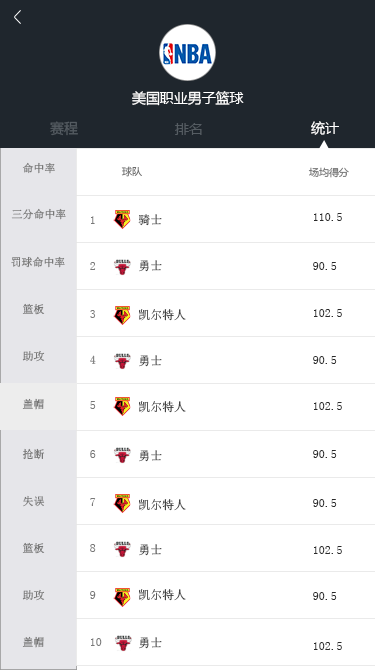
<style>
.page{position:relative;width:375px;height:670px;background:#ffffff}
.page>*{position:absolute;margin:0}
.t1{font:14px "MicrosoftYaHei";letter-spacing:-0.005em;color:#ffffff}
.t2{font:14px "MicrosoftYaHei";letter-spacing:-0.005em;color:#555c62}
.t3{font:11px "SimSun";letter-spacing:-0.005em;color:#787878}
.t4{font:10px "MicrosoftYaHei";letter-spacing:-0.005em;color:#6c6c6c}
.t5{font:12px "SimSun";letter-spacing:-0.005em;color:#787878}
.t6{font:12px "SimSun";letter-spacing:-0.005em}
.t7{font:12px "SimSun";letter-spacing:-0.005em;color:#2a2a2a}
</style>
<div class="page">
<p class="t1" style="left:132px;top:91px;width:112px;height:15px">美国职业男子篮球</p>
<p class="t2" style="left:50px;top:121px;width:28px;height:15px">赛程</p>
<p class="t2" style="left:175px;top:123px;width:27px;height:12px">排名</p>
<p class="t1" style="left:311px;top:121px;width:28px;height:14px">统计</p>
<p class="t3" style="left:22px;top:162px;width:33px;height:12px">命中率</p>
<p class="t4" style="left:121px;top:166px;width:21px;height:11px">球队</p>
<p class="t4" style="left:308px;top:167px;width:41px;height:11px">场均得分</p>
<p class="t3" style="left:11px;top:208px;width:55px;height:12px">三分命中率</p>
<p class="t5" style="left:91px;top:216px;width:4px;height:8px">1</p>
<p class="t6" style="left:138px;top:214px;width:24px;height:12px">骑士</p>
<p class="t7" style="left:314px;top:213px;width:28px;height:8px">110.5</p>
<p class="t3" style="left:11px;top:256px;width:54px;height:12px">罚球命中率</p>
<p class="t5" style="left:90px;top:262px;width:6px;height:8px">2</p>
<p class="t6" style="left:139px;top:260px;width:23px;height:12px">勇士</p>
<p class="t7" style="left:313px;top:262px;width:24px;height:8px">90.5</p>
<p class="t3" style="left:22px;top:303px;width:23px;height:12px">篮板</p>
<p class="t5" style="left:90px;top:310px;width:6px;height:8px">3</p>
<p class="t6" style="left:139px;top:309px;width:47px;height:12px">凯尔特人</p>
<p class="t7" style="left:314px;top:309px;width:28px;height:8px">102.5</p>
<p class="t3" style="left:22px;top:350px;width:23px;height:12px">助攻</p>
<p class="t5" style="left:90px;top:355px;width:6px;height:9px">4</p>
<p class="t6" style="left:139px;top:355px;width:23px;height:12px">勇士</p>
<p class="t7" style="left:313px;top:356px;width:24px;height:8px">90.5</p>
<p class="t3" style="left:22px;top:398px;width:22px;height:12px">盖帽</p>
<p class="t5" style="left:90px;top:401px;width:6px;height:8px">5</p>
<p class="t6" style="left:139px;top:401px;width:47px;height:12px">凯尔特人</p>
<p class="t7" style="left:314px;top:402px;width:28px;height:8px">102.5</p>
<p class="t3" style="left:22px;top:448px;width:23px;height:12px">抢断</p>
<p class="t5" style="left:90px;top:450px;width:6px;height:8px">6</p>
<p class="t6" style="left:139px;top:450px;width:23px;height:12px">勇士</p>
<p class="t7" style="left:313px;top:450px;width:24px;height:8px">90.5</p>
<p class="t3" style="left:23px;top:495px;width:22px;height:12px">失误</p>
<p class="t5" style="left:90px;top:498px;width:6px;height:8px">7</p>
<p class="t6" style="left:139px;top:499px;width:47px;height:12px">凯尔特人</p>
<p class="t7" style="left:313px;top:499px;width:24px;height:8px">90.5</p>
<p class="t3" style="left:22px;top:542px;width:23px;height:12px">篮板</p>
<p class="t5" style="left:90px;top:544px;width:6px;height:8px">8</p>
<p class="t6" style="left:139px;top:544px;width:23px;height:12px">勇士</p>
<p class="t7" style="left:314px;top:546px;width:28px;height:8px">102.5</p>
<p class="t3" style="left:22px;top:589px;width:23px;height:12px">助攻</p>
<p class="t5" style="left:90px;top:591px;width:6px;height:8px">9</p>
<p class="t6" style="left:139px;top:589px;width:47px;height:12px">凯尔特人</p>
<p class="t7" style="left:313px;top:592px;width:24px;height:8px">90.5</p>
<p class="t3" style="left:22px;top:636px;width:22px;height:12px">盖帽</p>
<p class="t5" style="left:91px;top:638px;width:11px;height:8px">10</p>
<p class="t6" style="left:139px;top:637px;width:23px;height:12px">勇士</p>
<p class="t7" style="left:314px;top:642px;width:28px;height:8px">102.5</p>
</div>
